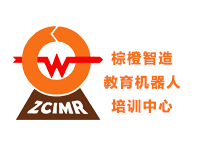
<style>
.page{position:relative;width:200px;height:150px;background:#ffffff}
.page>*{position:absolute;margin:0}
.t1{font:14px/24px "MicrosoftYaHei-Bold";letter-spacing:0.12em;color:#f76f17}
</style>
<div class="page">
<p class="t1" style="left:103px;top:51px;width:78px;height:62px;text-align:center">棕橙智造<br>教育机器人<br>培训中心</p>
</div>
